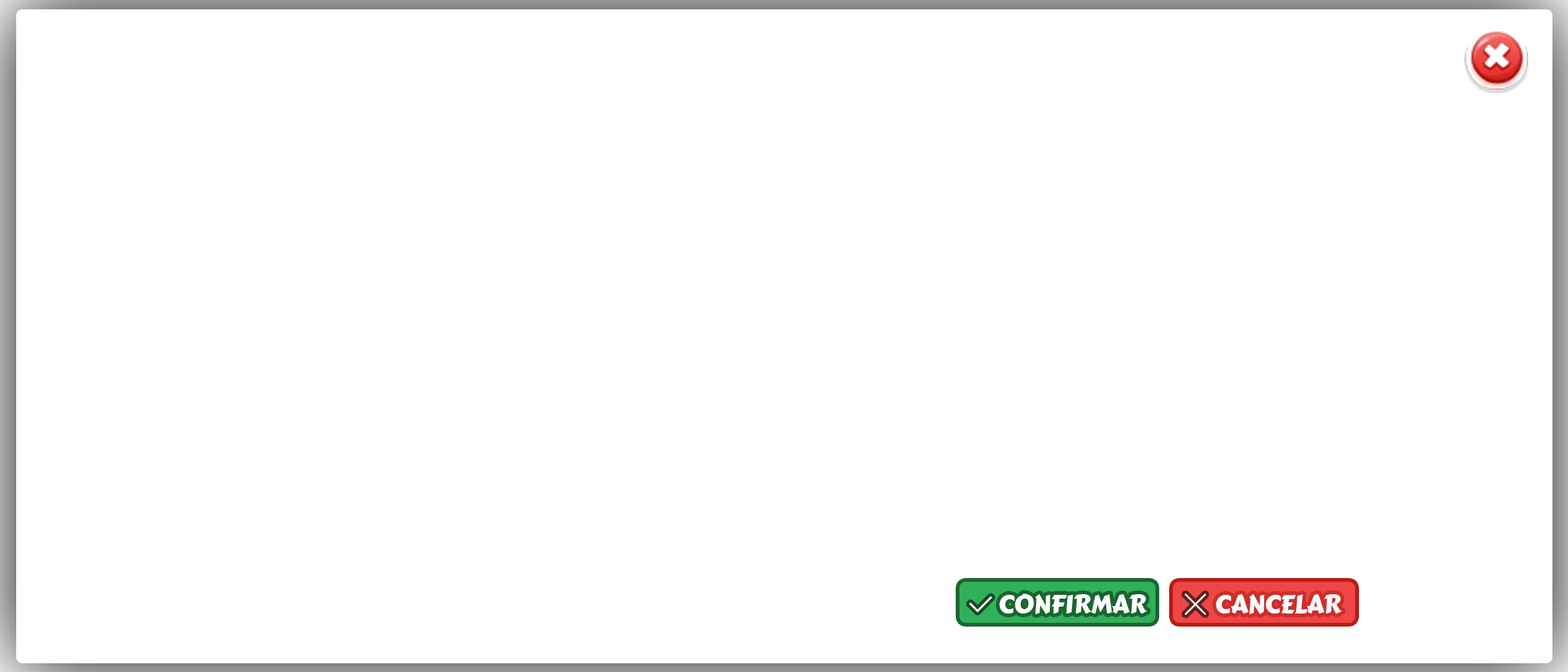
<style>
.page{position:relative;width:1568px;height:672px;background:#ffffff}
.page>*{position:absolute;margin:0}
.t1{font:25.7px "CarterOne";letter-spacing:-0.02em;color:#ffffff}
</style>
<div class="page">
<p class="t1" style="left:999px;top:594px;width:148px;height:20px">CONFIRMAR</p>
<p class="t1" style="left:1216px;top:594px;width:126px;height:20px">CANCELAR</p>
</div>
